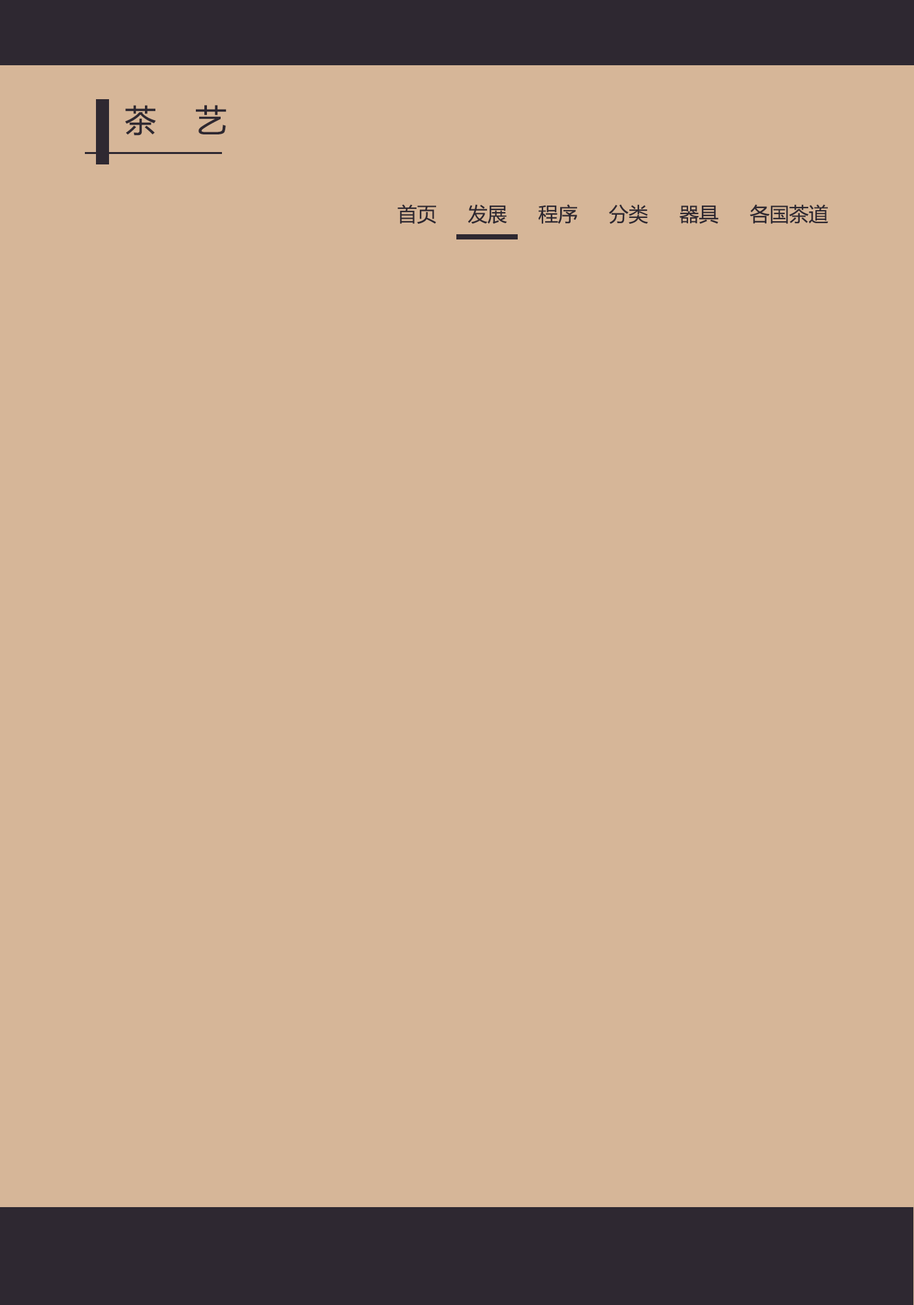
<style>
.page{position:relative;width:914px;height:1305px;background:#d6b698}
.page>*{position:absolute;margin:0}
.t1{font:31.3px "MicrosoftYaHei";color:#2e2831}
.t2{font:19.6px "MicrosoftYaHei";color:#2e2831}
</style>
<div class="page">
<p class="t1" style="left:125px;top:105px;width:101px;height:31px">茶  艺</p>
<p class="t2" style="left:397px;top:204px;width:431px;height:20px">首页  发展   程序  分类   器具   各国茶道</p>
</div>
